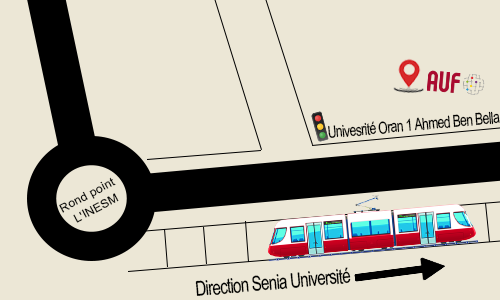
<style>
.page{position:relative;width:500px;height:300px;background:#ece7d6}
.page>*{position:absolute;margin:0}
.t1{font:16.5px "ArialMT";letter-spacing:-0.045em;color:#000000;scale:0.73 1}
.t2{font:11.6px/15.7px "ArialMT";letter-spacing:0.015em;color:#000000;scale:1.04 1}
.t3{font:20.6px "ArialMT";letter-spacing:-0.045em;color:#000000;scale:0.73 1}
</style>
<div class="page">
<p class="t1" style="left:328px;top:111px;width:172px;height:27px;rotate:-5deg">Univesrité Oran 1 Ahmed Ben Bella</p>
<p class="t2" style="left:59px;top:177px;width:60px;height:46px;text-align:center;rotate:-28deg">Rond point <br>L'INESM</p>
<p class="t3" style="left:195px;top:267px;width:156px;height:29px;rotate:-5deg">Direction Senia Université</p>
</div>
